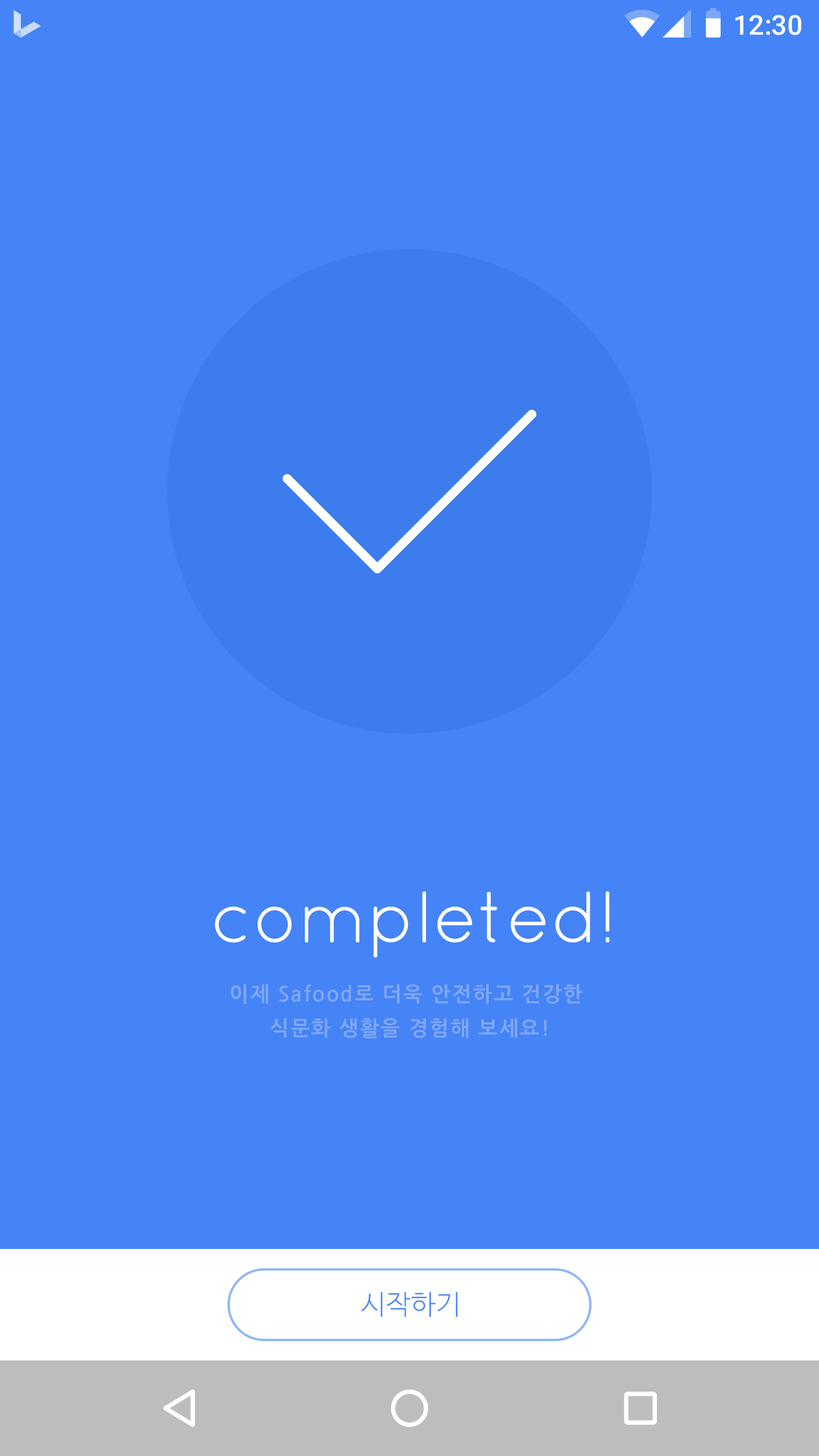
<style>
.page{position:relative;width:819px;height:1456px;background:#4484f6}
.page>*{position:absolute;margin:0}
.t1{font:27.3px "Roboto-Medium";color:#ffffff}
.t2{font:72.8px "Quicksand-Regular";color:#ffffff}
.t3{font:20.5px/34.1px "NanumGothicBold";letter-spacing:0.075em;color:#82a8f8}
.t4{font:27.3px "NanumBarunGothicLight";letter-spacing:0.025em;color:#4484f6}
</style>
<div class="page">
<p class="t1" style="left:735px;top:15px;width:66px;height:20px">12:30</p>
<p class="t2" style="left:215px;top:891px;width:395px;height:67px">completed!</p>
<p class="t3" style="left:231px;top:984px;width:351px;height:55px;text-align:center">이제 Safood로 더욱 안전하고 건강한 <br>식문화 생활을 경험해 보세요!</p>
<p class="t4" style="left:361px;top:1292px;width:97px;height:25px">시작하기</p>
</div>
